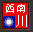
<style>
.page{position:relative;width:33px;height:32px;background:#f20000}
.page>*{position:absolute;margin:0}
.t1{font:10.4px "SimSun";color:#ffffff}
.t2{font:11.7px "SimSun";color:#ffffff}
</style>
<div class="page">
<p class="t1" style="left:6px;top:4px;width:19px;height:9px">西南</p>
<p class="t2" style="left:16px;top:15px;width:11px;height:12px">川</p>
</div>
